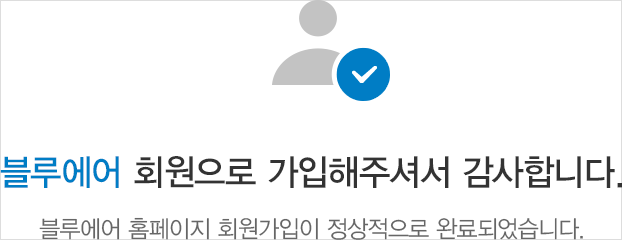
<style>
.page{position:relative;width:622px;height:240px;background:#ffffff}
.page>*{position:absolute;margin:0}
.t1{font:36px "YDVYGO33";letter-spacing:-0.025em;color:#333333;scale:0.95 1}
.t2{font:36px "YDVYGO33";letter-spacing:-0.025em;color:#007dc5;scale:0.95 1}
.t3{font:24px "YDVYGO32";letter-spacing:-0.025em;color:#666666;scale:0.95 1}
</style>
<div class="page">
<p class="t1" style="left:0px;top:156px;width:622px;height:32px"><span class="t2">블루에어 </span>회원으로 가입해주셔서 감사합니다.</p>
<p class="t3" style="left:39px;top:217px;width:544px;height:23px">블루에어 홈페이지 회원가입이 정상적으로 완료되었습니다.</p>
</div>
